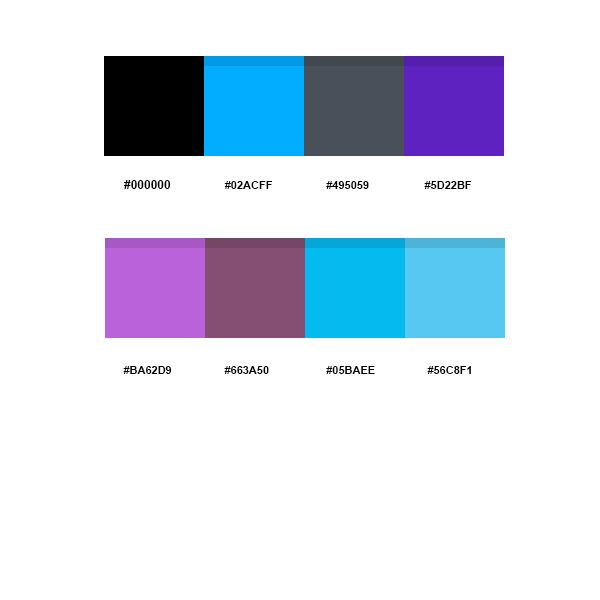
<style>
.page{position:relative;width:600px;height:600px;background:#ffffff}
.page>*{position:absolute;margin:0}
.t1{font:12px "Arial-BoldMT";color:#000000}
.t2{font:11px "Arial-BoldMT";color:#000000}
.t3{font:11px "Arial-BoldMT";color:#000000;text-transform:uppercase}
</style>
<div class="page">
<p class="t1" style="left:123px;top:180px;width:48px;height:9px">#000000</p>
<p class="t2" style="left:224px;top:181px;width:49px;height:8px">#02ACFF</p>
<p class="t2" style="left:326px;top:181px;width:43px;height:8px">#495059</p>
<p class="t2" style="left:424px;top:181px;width:48px;height:8px">#5D22BF</p>
<p class="t2" style="left:123px;top:366px;width:49px;height:8px">#BA62D9</p>
<p class="t3" style="left:224px;top:366px;width:45px;height:8px">#663a50</p>
<p class="t3" style="left:326px;top:366px;width:49px;height:8px">#05baee</p>
<p class="t3" style="left:427px;top:366px;width:44px;height:8px">#56c8f1</p>
</div>
